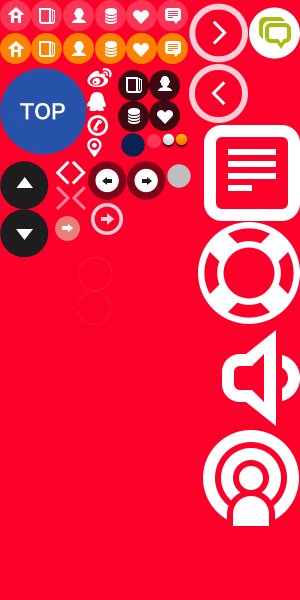
<style>
.page{position:relative;width:300px;height:600px;background:#fb012a}
.page>*{position:absolute;margin:0}
.t1{font:20px "HiraginoSansGB-W6";color:#ffffff}
</style>
<div class="page">
<p class="t1" style="left:20px;top:103px;width:45px;height:17px">TOP</p>
</div>
